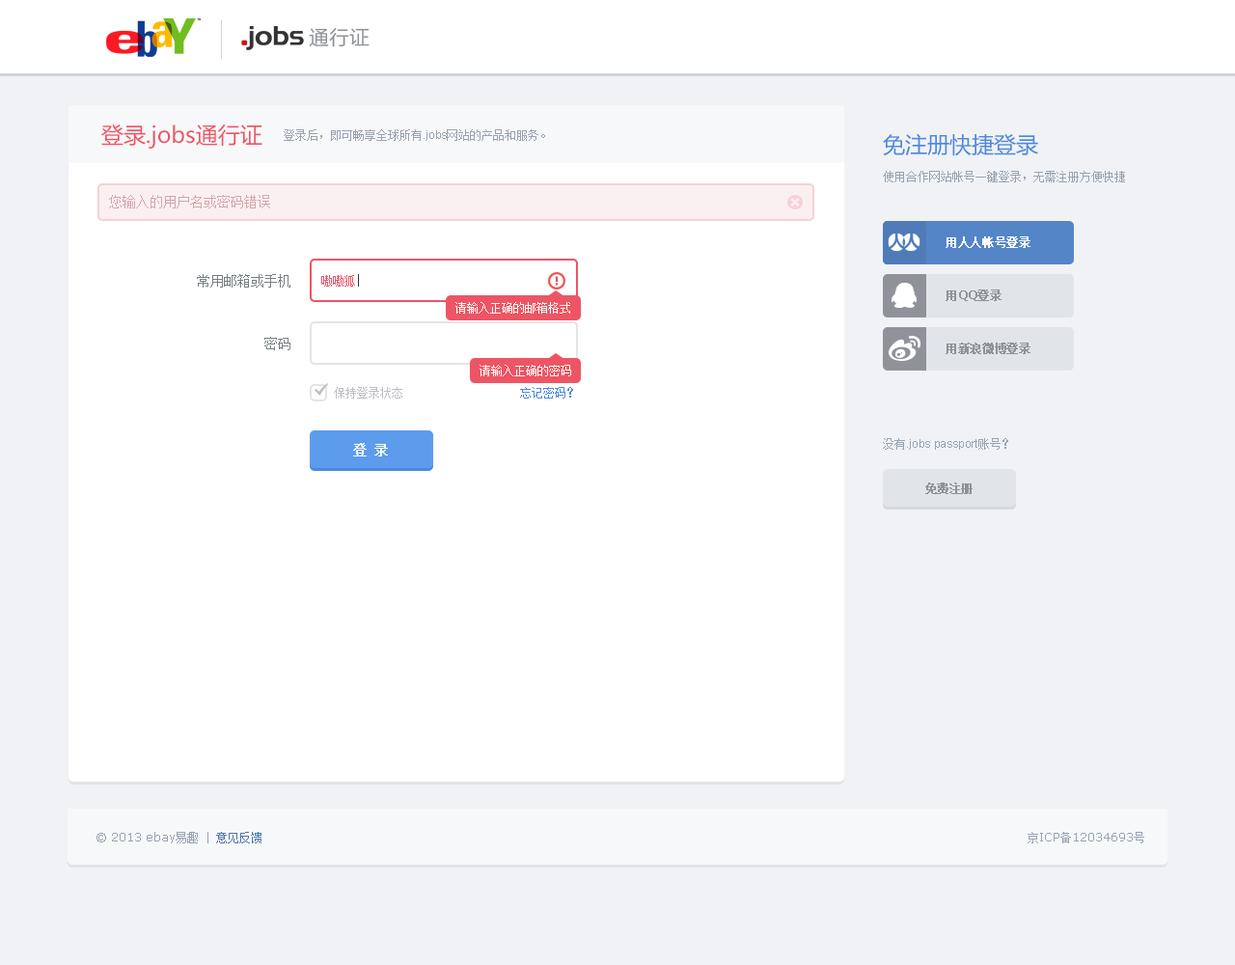
<style>
.page{position:relative;width:1235px;height:965px;background:#ffffff}
.page>*{position:absolute;margin:0}
.t1{font:20.3px "FZLTHJW--GB1-0";color:#8f9399}
.t2{font:22.2px "MicrosoftYaHei";color:#ed5565}
.t3{font:11.6px "SimSun";color:#99a3b1}
.t4{font:11.6px "ArialMT";color:#99a3b1}
.t5{font:22.2px "MicrosoftYaHei";color:#4b89dc}
.t6{font:13.5px "SimSun";color:#d5a5aa}
.t7{font:11.6px "SimSun";letter-spacing:0.025em;color:#ffffff;font-weight:bold}
.t8{font:13.5px "SimSun";color:#768082}
.t9{font:11.6px "SimSun";color:#ed5565}
.t10{font:11.6px "Verdana";letter-spacing:0.025em;color:#8f9399;font-weight:bold}
.t11{font:11.6px "SimSun";letter-spacing:0.025em;color:#8f9399;font-weight:bold}
.t12{font:11.6px "SimSun";color:#ffffff}
.t13{font:11.6px "SimSun";color:#bdbec3}
.t14{font:11.6px "SimSun";color:#4b89dc}
.t15{font:13.5px "SimSun";color:#ffffff;text-transform:uppercase;font-weight:bold}
.t16{font:11.6px "SimSun";color:#8f9399;font-weight:bold}
.t17{font:11.6px "Verdana";color:#99a3b1}
.t18{font:11.6px "SimSun";color:#5076a8}
</style>
<div class="page">
<p class="t1" style="left:309px;top:28px;width:61px;height:19px">通行证</p>
<p class="t2" style="left:101px;top:124px;width:162px;height:25px">登录.jobs通行证</p>
<p class="t3" style="left:284px;top:129px;width:261px;height:12px">登录后，即可畅享全球所有<span class="t4">.jobs</span>网站的产品和服务。</p>
<p class="t5" style="left:883px;top:133px;width:156px;height:23px">免注册快捷登录</p>
<p class="t3" style="left:883px;top:171px;width:242px;height:11px">使用合作网站帐号一键登录，无需注册方便快捷</p>
<p class="t6" style="left:109px;top:195px;width:161px;height:13px">您输入的用户名或密码错误</p>
<p class="t7" style="left:946px;top:236px;width:85px;height:12px">用人人帐号登录</p>
<p class="t7" style="left:946px;top:236px;width:85px;height:12px">用人人帐号登录</p>
<p class="t8" style="left:197px;top:274px;width:94px;height:14px">常用邮箱或手机</p>
<p class="t9" style="left:321px;top:275px;width:34px;height:12px">嗷嗷狐</p>
<p class="t10" style="left:946px;top:290px;width:56px;height:11px"><span class="t11">用</span>QQ<span class="t11">登录</span></p>
<p class="t12" style="left:456px;top:302px;width:114px;height:12px">请输入正确的邮箱格式</p>
<p class="t8" style="left:264px;top:337px;width:27px;height:13px">密码</p>
<p class="t11" style="left:946px;top:343px;width:85px;height:11px">用新浪微博登录</p>
<p class="t12" style="left:480px;top:365px;width:91px;height:11px">请输入正确的密码</p>
<p class="t13" style="left:334px;top:387px;width:68px;height:12px">保持登录状态</p>
<p class="t14" style="left:520px;top:387px;width:53px;height:12px">忘记密码？</p>
<p class="t15" style="left:353px;top:443px;width:35px;height:14px">登 录</p>
<p class="t4" style="left:883px;top:438px;width:126px;height:12px"><span class="t3">没有</span>.jobs passport<span class="t3">账号？</span></p>
<p class="t16" style="left:926px;top:483px;width:47px;height:11px">免费注册</p>
<p class="t17" style="left:97px;top:832px;width:165px;height:12px">© 2013 ebay<span class="t3">易趣</span><span class="t3"> | </span><span class="t18">意见反馈</span></p>
<p class="t17" style="left:1028px;top:832px;width:117px;height:12px"><span class="t3">京</span>ICP<span class="t3">备</span>12034693<span class="t3">号</span></p>
</div>
